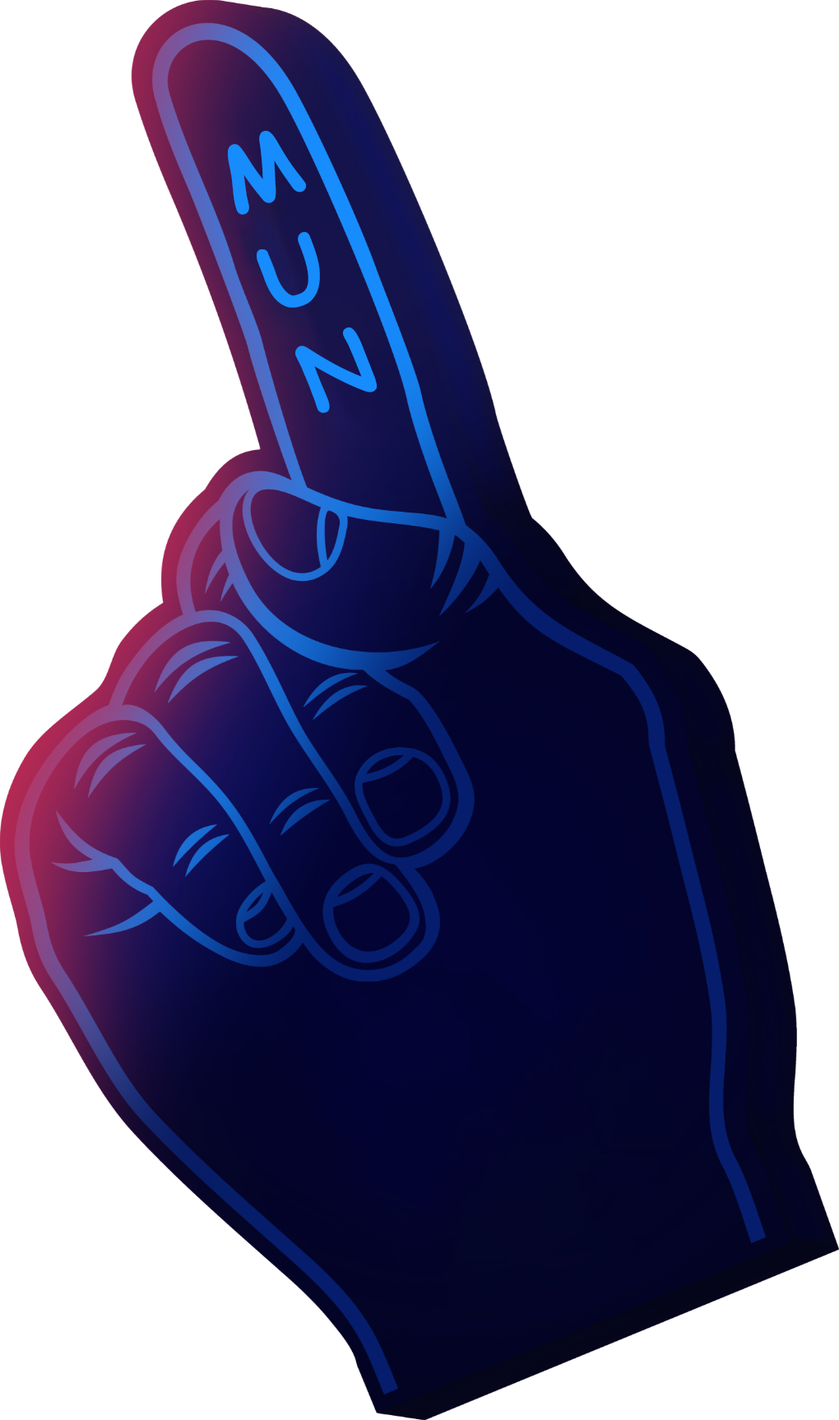
<style>
.page{position:relative;width:839px;height:1420px;background:#ffffff}
.page>*{position:absolute;margin:0}
.t1{font:89px "ComicSansMS-Bold";color:#178cfd}
</style>
<div class="page">
<p class="t1" style="left:228px;top:131px;width:149px;height:282px;rotate:-22deg">MUN</p>
</div>
